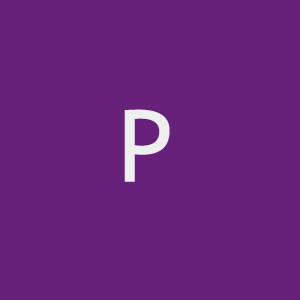
<style>
.page{position:relative;width:300px;height:300px;background:#68217a}
.page>*{position:absolute;margin:0}
.t1{font:100px "TrebuchetMS";color:#efefef}
</style>
<div class="page">
<p class="t1" style="left:124px;top:109px;width:46px;height:73px">P</p>
</div>
